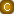
<style>
.page{position:relative;width:14px;height:14px}
.page>*{position:absolute;margin:0}
.t1{font:11px "ArialMT";letter-spacing:-0.05em;color:#ffffff}
</style>
<div class="page">
<p class="t1" style="left:4px;top:3px;width:6px;height:8px">C</p>
</div>
